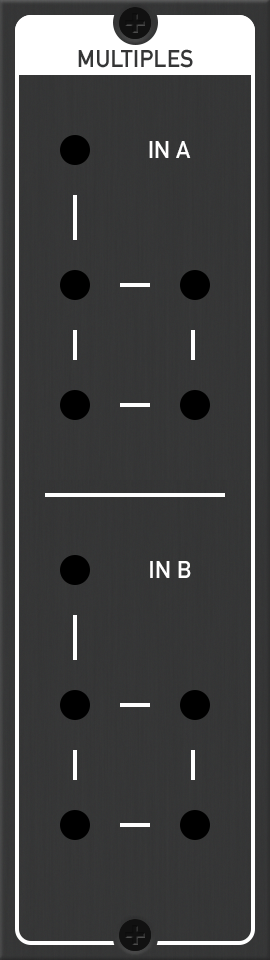
<style>
.page{position:relative;width:270px;height:960px}
.page>*{position:absolute;margin:0}
.t1{font:24px "DINAlternate-Bold";color:#ffffff;font-variant:small-caps}
</style>
<div class="page">
<p class="t1" style="left:149px;top:141px;width:42px;height:17px">IN A</p>
<p class="t1" style="left:150px;top:561px;width:41px;height:17px">IN B</p>
</div>
